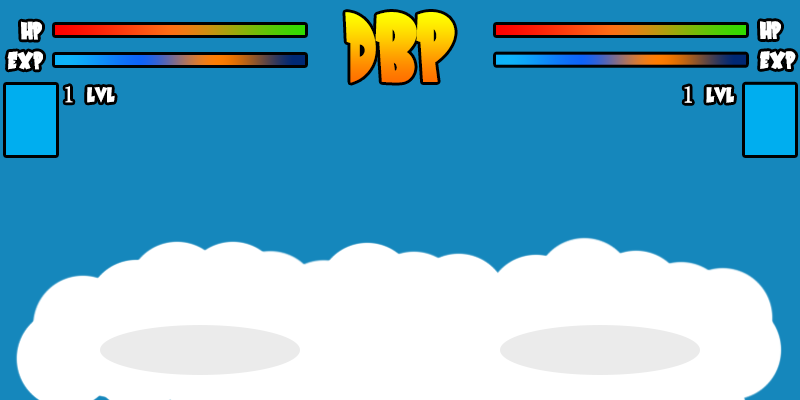
<style>
.page{position:relative;width:800px;height:400px;background:#1587bc}
.page>*{position:absolute;margin:0}
.t1{font:100px "SaiyanSans"}
.t2{font:25px "SaiyanSans";color:#ffffff}
.t3{font:25.1px "SaiyanSans";color:#ffffff}
.t4{font:25px "MinionPro-Regular";color:#ffffff}
.t5{font:25.3px "SaiyanSans";color:#ffffff}
.t6{font:25.3px "MinionPro-Regular";color:#ffffff}
</style>
<div class="page">
<p class="t1" style="left:345px;top:12px;width:110px;height:71px">DBP</p>
<p class="t2" style="left:21px;top:21px;width:21px;height:19px">HP</p>
<p class="t3" style="left:760px;top:21px;width:21px;height:19px">HP</p>
<p class="t2" style="left:7px;top:51px;width:36px;height:19px">EXP</p>
<p class="t3" style="left:760px;top:51px;width:36px;height:18px">EXP</p>
<p class="t2" style="left:65px;top:86px;width:50px;height:17px"><span class="t4">1</span> lvl</p>
<p class="t5" style="left:684px;top:86px;width:50px;height:17px"><span class="t6">1</span> lvl</p>
</div>
